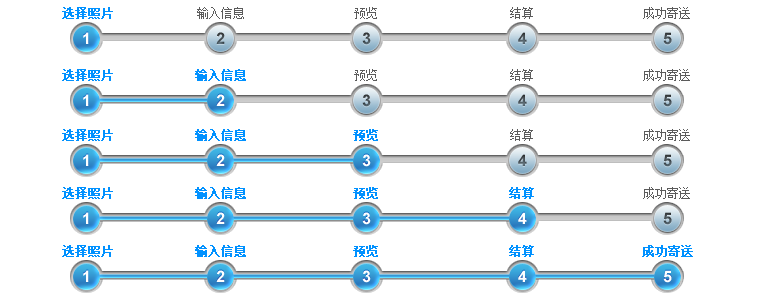
<style>
.page{position:relative;width:768px;height:300px;background:#ffffff}
.page>*{position:absolute;margin:0}
.t1{font:12px "SimSun";color:#0091ff;font-weight:bold}
.t2{font:12px "SimSun";color:#5b5b5b}
.t3{font:12px "SimSun";letter-spacing:-0.01em;color:#5b5b5b}
.t4{font:16px "Arial-BoldMT";color:#ffffff}
.t5{font:16px "Arial-BoldMT"}
.t6{font:16px "Arial-BoldMT";color:#424a4d}
.t7{font:12px "SimSun";letter-spacing:-0.01em;color:#0091ff;font-weight:bold}
</style>
<div class="page">
<p class="t1" style="left:62px;top:7px;width:51px;height:12px">选择照片</p>
<p class="t2" style="left:197px;top:7px;width:47px;height:12px"><span class="t1">  </span>输入信息</p>
<p class="t3" style="left:354px;top:7px;width:23px;height:12px">预览</p>
<p class="t3" style="left:510px;top:7px;width:23px;height:12px">结算</p>
<p class="t3" style="left:643px;top:7px;width:47px;height:12px">成功寄送</p>
<p class="t4" style="left:83px;top:32px;width:6px;height:12px">1</p>
<p class="t5" style="left:216px;top:32px;width:9px;height:12px">2</p>
<p class="t5" style="left:362px;top:32px;width:9px;height:13px">3</p>
<p class="t5" style="left:518px;top:32px;width:9px;height:12px">4</p>
<p class="t6" style="left:663px;top:32px;width:9px;height:13px">5</p>
<p class="t1" style="left:62px;top:69px;width:51px;height:12px">选择照片</p>
<p class="t1" style="left:195px;top:69px;width:51px;height:12px">输入信息</p>
<p class="t3" style="left:354px;top:69px;width:23px;height:12px">预览</p>
<p class="t3" style="left:510px;top:69px;width:23px;height:12px">结算</p>
<p class="t3" style="left:643px;top:69px;width:47px;height:12px">成功寄送</p>
<p class="t4" style="left:83px;top:94px;width:6px;height:12px">1</p>
<p class="t4" style="left:216px;top:94px;width:9px;height:12px">2</p>
<p class="t5" style="left:362px;top:94px;width:9px;height:13px">3</p>
<p class="t5" style="left:518px;top:94px;width:9px;height:12px">4</p>
<p class="t6" style="left:663px;top:94px;width:9px;height:13px">5</p>
<p class="t1" style="left:62px;top:129px;width:51px;height:12px">选择照片</p>
<p class="t1" style="left:195px;top:129px;width:51px;height:12px">输入信息</p>
<p class="t7" style="left:353px;top:129px;width:25px;height:12px">预览</p>
<p class="t3" style="left:510px;top:129px;width:23px;height:12px">结算</p>
<p class="t3" style="left:643px;top:129px;width:47px;height:12px">成功寄送</p>
<p class="t4" style="left:83px;top:154px;width:6px;height:12px">1</p>
<p class="t4" style="left:216px;top:154px;width:9px;height:12px">2</p>
<p class="t4" style="left:362px;top:154px;width:9px;height:13px">3</p>
<p class="t4" style="left:362px;top:154px;width:9px;height:13px">3</p>
<p class="t5" style="left:518px;top:154px;width:9px;height:12px">4</p>
<p class="t6" style="left:663px;top:154px;width:9px;height:13px">5</p>
<p class="t1" style="left:62px;top:187px;width:51px;height:12px">选择照片</p>
<p class="t1" style="left:195px;top:187px;width:51px;height:12px">输入信息</p>
<p class="t7" style="left:353px;top:187px;width:25px;height:12px">预览</p>
<p class="t7" style="left:509px;top:187px;width:25px;height:12px">结算</p>
<p class="t3" style="left:643px;top:187px;width:47px;height:12px">成功寄送</p>
<p class="t4" style="left:83px;top:212px;width:6px;height:12px">1</p>
<p class="t4" style="left:216px;top:212px;width:9px;height:12px">2</p>
<p class="t4" style="left:362px;top:212px;width:9px;height:13px">3</p>
<p class="t4" style="left:362px;top:212px;width:9px;height:13px">3</p>
<p class="t4" style="left:518px;top:212px;width:9px;height:12px">4</p>
<p class="t6" style="left:663px;top:212px;width:9px;height:13px">5</p>
<p class="t1" style="left:62px;top:245px;width:51px;height:12px">选择照片</p>
<p class="t1" style="left:195px;top:245px;width:51px;height:12px">输入信息</p>
<p class="t7" style="left:353px;top:245px;width:25px;height:12px">预览</p>
<p class="t7" style="left:509px;top:245px;width:25px;height:12px">结算</p>
<p class="t7" style="left:642px;top:245px;width:51px;height:12px">成功寄送</p>
<p class="t4" style="left:83px;top:270px;width:6px;height:12px">1</p>
<p class="t4" style="left:216px;top:270px;width:9px;height:12px">2</p>
<p class="t4" style="left:362px;top:270px;width:9px;height:13px">3</p>
<p class="t4" style="left:518px;top:270px;width:9px;height:12px">4</p>
<p class="t4" style="left:663px;top:270px;width:9px;height:13px">5</p>
</div>
